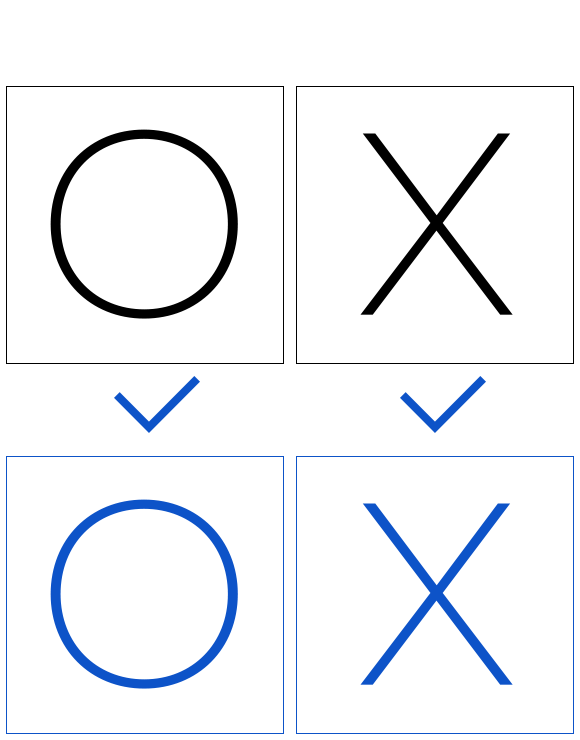
<style>
.page{position:relative;width:580px;height:740px;background:#ffffff}
.page>*{position:absolute;margin:0}
.t1{font:229.3px "GmarketSansLight";letter-spacing:-0.045em;color:#000000}
.t2{font:229.3px "GmarketSansLight";letter-spacing:-0.045em;color:#0d53c8}
</style>
<div class="page">
<p class="t1" style="left:50px;top:129px;width:188px;height:190px">O</p>
<p class="t1" style="left:360px;top:133px;width:153px;height:182px">X</p>
<p class="t2" style="left:50px;top:499px;width:188px;height:190px">O</p>
<p class="t2" style="left:360px;top:503px;width:153px;height:182px">X</p>
</div>
